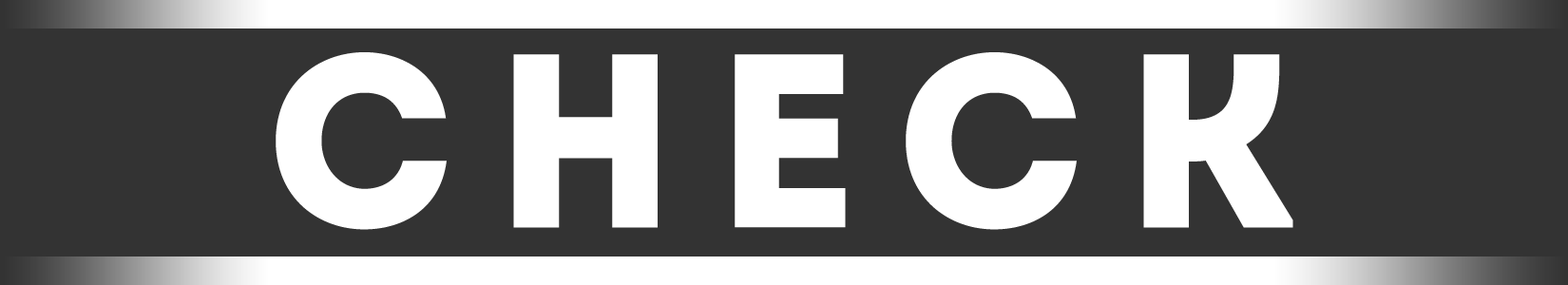
<style>
.page{position:relative;width:1568px;height:285px;background:#333333}
.page>*{position:absolute;margin:0}
.t1{font:247.1px "Intro";letter-spacing:0.134em;color:#ffffff}
</style>
<div class="page">
<p class="t1" style="left:276px;top:52px;width:1017px;height:178px">CHECK</p>
</div>
